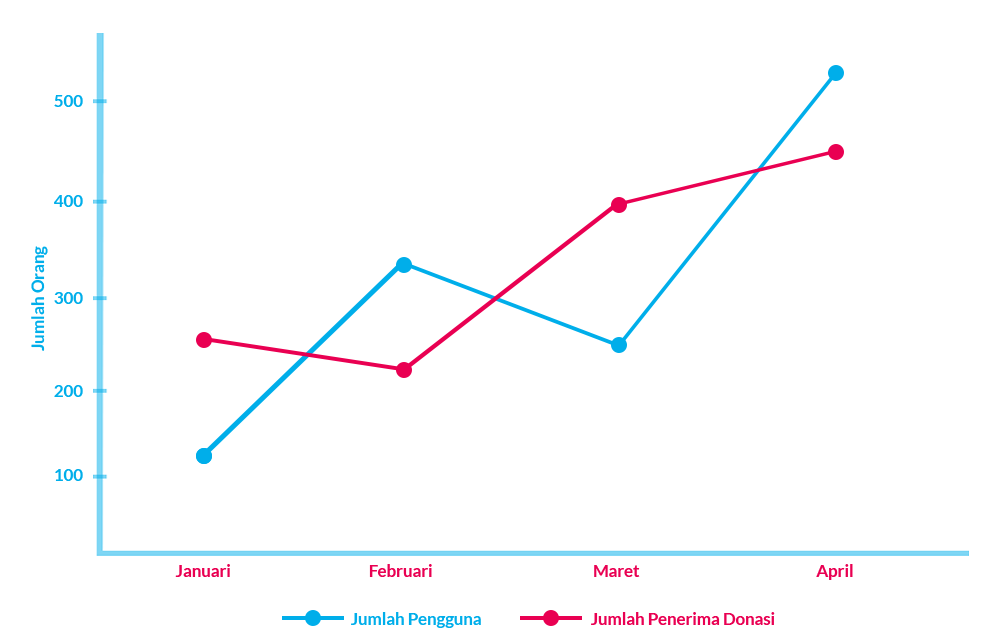
<style>
.page{position:relative;width:1000px;height:640px;background:#ffffff}
.page>*{position:absolute;margin:0}
.t1{font:16.8px "Lato-Bold";color:#00aeea}
.t2{font:17px "Lato-Bold";color:#00aeea}
.t3{font:16.8px "Lato-Bold";color:#e90052}
</style>
<div class="page">
<p class="t1" style="left:54px;top:95px;width:29px;height:12px">500</p>
<p class="t1" style="left:54px;top:195px;width:29px;height:12px">400</p>
<p class="t2" style="left:31px;top:246px;width:17px;height:105px;rotate:-90deg">Jumlah Orang</p>
<p class="t1" style="left:54px;top:292px;width:29px;height:12px">300</p>
<p class="t1" style="left:54px;top:385px;width:29px;height:12px">200</p>
<p class="t1" style="left:55px;top:469px;width:28px;height:12px">100</p>
<p class="t3" style="left:175px;top:564px;width:55px;height:13px">Januari</p>
<p class="t3" style="left:369px;top:564px;width:63px;height:13px">Februari</p>
<p class="t3" style="left:594px;top:565px;width:46px;height:12px">Maret</p>
<p class="t3" style="left:816px;top:564px;width:37px;height:16px">April</p>
<p class="t1" style="left:351px;top:612px;width:130px;height:16px">Jumlah Pengguna</p>
<p class="t3" style="left:591px;top:612px;width:184px;height:13px">Jumlah Penerima Donasi</p>
</div>
